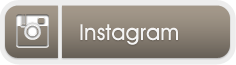
<style>
.page{position:relative;width:236px;height:65px}
.page>*{position:absolute;margin:0}
.t1{font:22.2px "AvantGardeITCbyBT-Medium";color:#f4f4f4}
</style>
<div class="page">
<p class="t1" style="left:80px;top:24px;width:98px;height:21px">Instagram</p>
</div>
